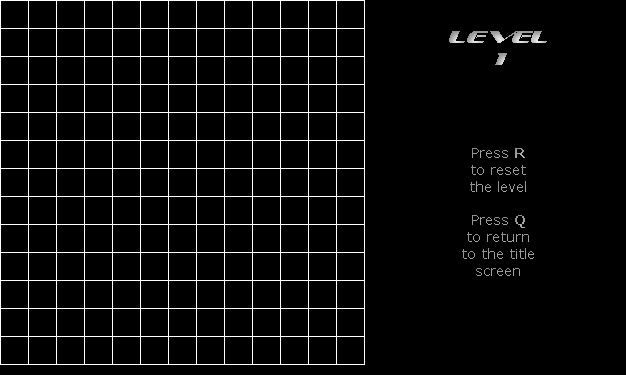
<style>
.page{position:relative;width:626px;height:375px;background:#000000}
.page>*{position:absolute;margin:0}
.t1{font:18px "SofachromeItalic"}
.t2{font:14px "Verdana";color:#9a9a9a}
.t3{font:14px "Verdana-Bold";color:#9a9a9a}
</style>
<div class="page">
<p class="t1" style="left:449px;top:31px;width:98px;height:34px;text-align:center">Level<br>1</p>
<p class="t2" style="left:462px;top:148px;width:72px;height:128px;text-align:center">Press <span class="t3">R<br></span>to reset<br>the level<br><br>Press <span class="t3">Q<br></span>to return<br>to the title<br>screen</p>
</div>
